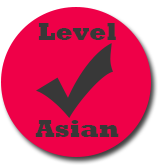
<style>
.page{position:relative;width:158px;height:165px;background:#ef0048}
.page>*{position:absolute;margin:0}
.t1{font:25px "Rockwell-ExtraBold";color:#383838}
</style>
<div class="page">
<p class="t1" style="left:38px;top:23px;width:78px;height:17px">Level</p>
<p class="t1" style="left:35px;top:120px;width:84px;height:17px">Asian</p>
</div>
